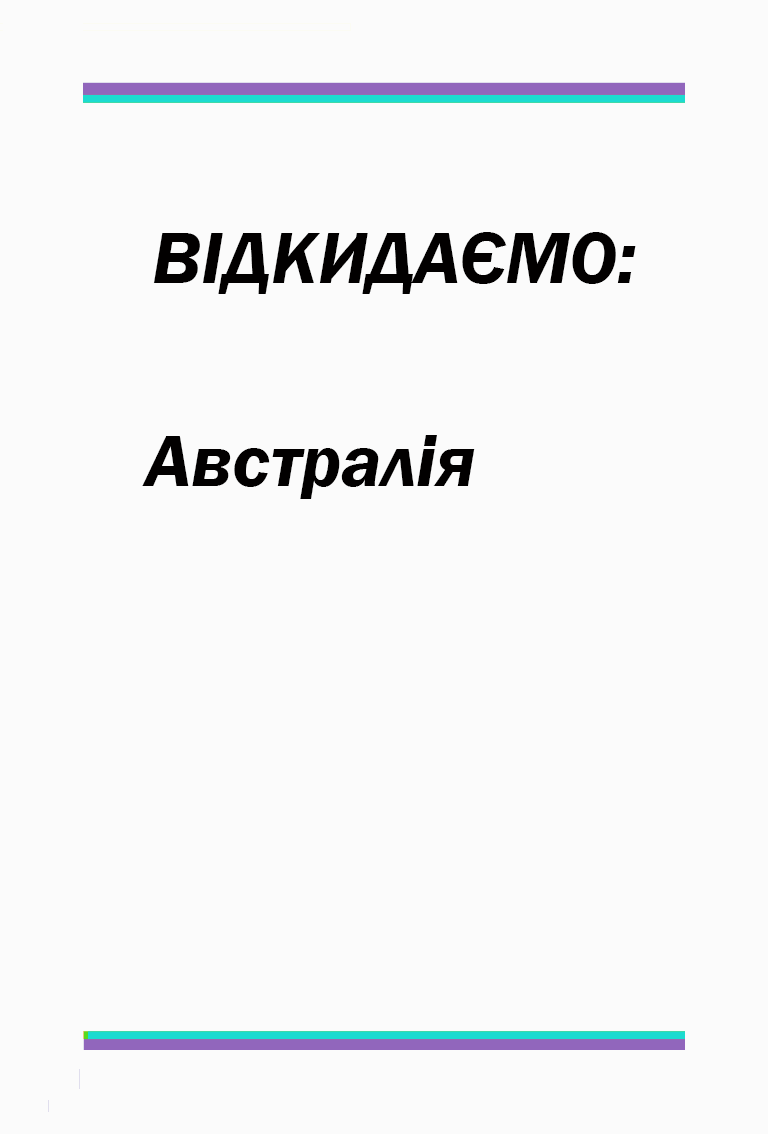
<style>
.page{position:relative;width:768px;height:1134px;background:#fbfbfb}
.page>*{position:absolute;margin:0}
.t1{font:75px "FranklinGothic-DemiItalic";color:#020000}
</style>
<div class="page">
<p class="t1" style="left:153px;top:232px;width:483px;height:62px">ВІДКИДАЄМО:</p>
<p class="t1" style="left:142px;top:435px;width:333px;height:64px">Австралія</p>
</div>
